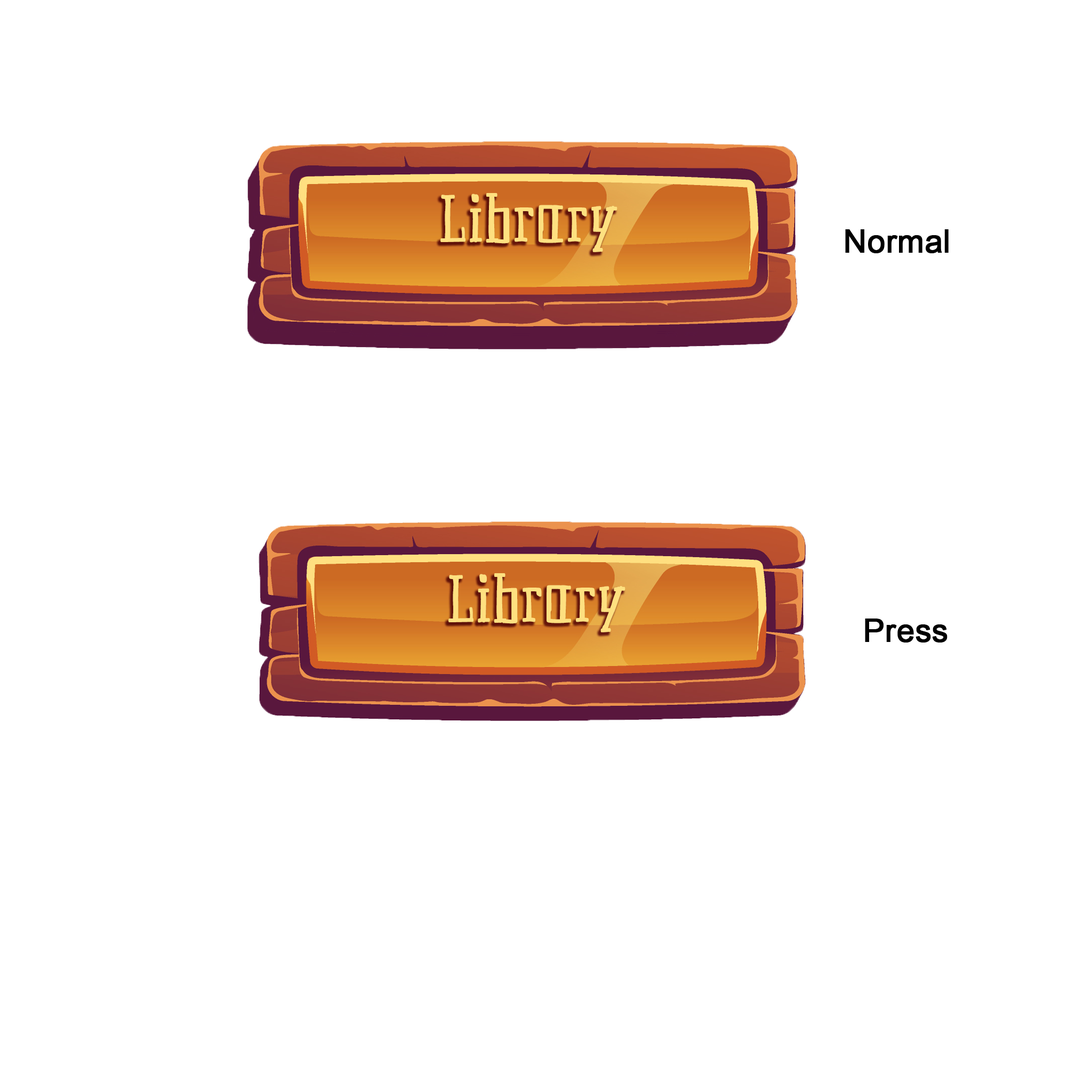
<style>
.page{position:relative;width:1092px;height:1092px;background:#ffffff}
.page>*{position:absolute;margin:0}
.t1{font:66.6px "Historian";color:#fee080;font-weight:bold;scale:0.6 1}
.t2{font:31.9px "ArialMT";color:#000000;font-weight:bold}
</style>
<div class="page">
<p class="t1" style="left:440px;top:193px;width:177px;height:59px">Library</p>
<p class="t2" style="left:845px;top:229px;width:104px;height:24px">Normal</p>
<p class="t1" style="left:448px;top:573px;width:177px;height:59px">Library</p>
<p class="t2" style="left:865px;top:619px;width:82px;height:24px">Press</p>
</div>
